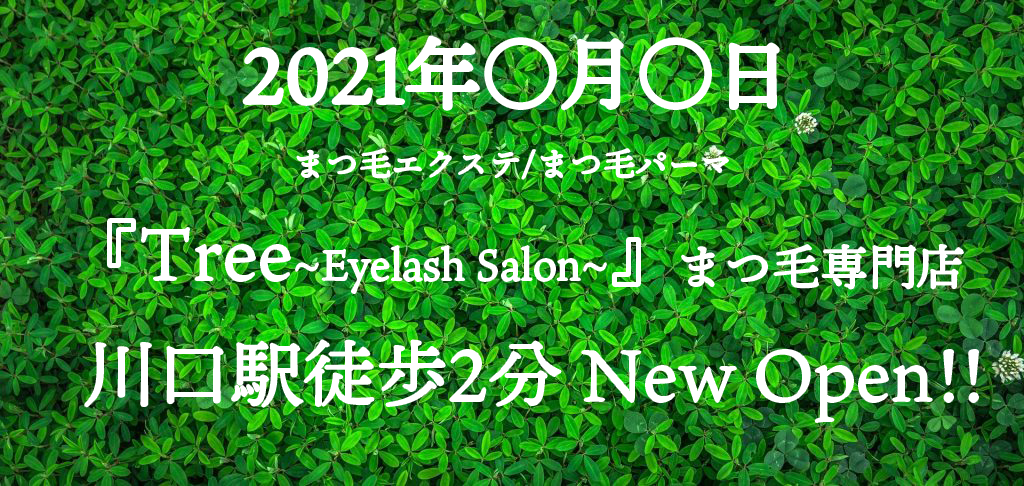
<style>
.page{position:relative;width:1024px;height:486px}
.page>*{position:absolute;margin:0}
.t1{font:77.4px "TenMinchoText-Regular";color:#ffffff}
.t2{font:32.5px "TenMinchoText-Regular";color:#ffffff}
.t3{font:72.8px/20.2px "TenMinchoText-Regular";color:#ffffff}
.t4{font:41.5px/20.2px "TenMinchoText-Regular";color:#ffffff}
.t5{font:42.5px/20.2px "TenMinchoText-Regular";color:#ffffff}
.t6{font:48.2px "TenMinchoText-Regular";color:#ffffff}
</style>
<div class="page">
<p class="t1" style="left:244px;top:37px;width:534px;height:72px">2021年○月○日</p>
<p class="t2" style="left:297px;top:149px;width:431px;height:30px">まつ毛エクステ/まつ毛パーマ</p>
<p class="t3" style="left:85px;top:219px;width:893px;height:203px">『Tree<span class="t4">~</span><span class="t5">Eyelash Salon</span><span class="t4">~</span>』<br><br><br><br><br><br> 川口駅徒歩2分 New Open!!</p>
<p class="t6" style="left:682px;top:245px;width:281px;height:44px">まつ毛専門店</p>
</div>
